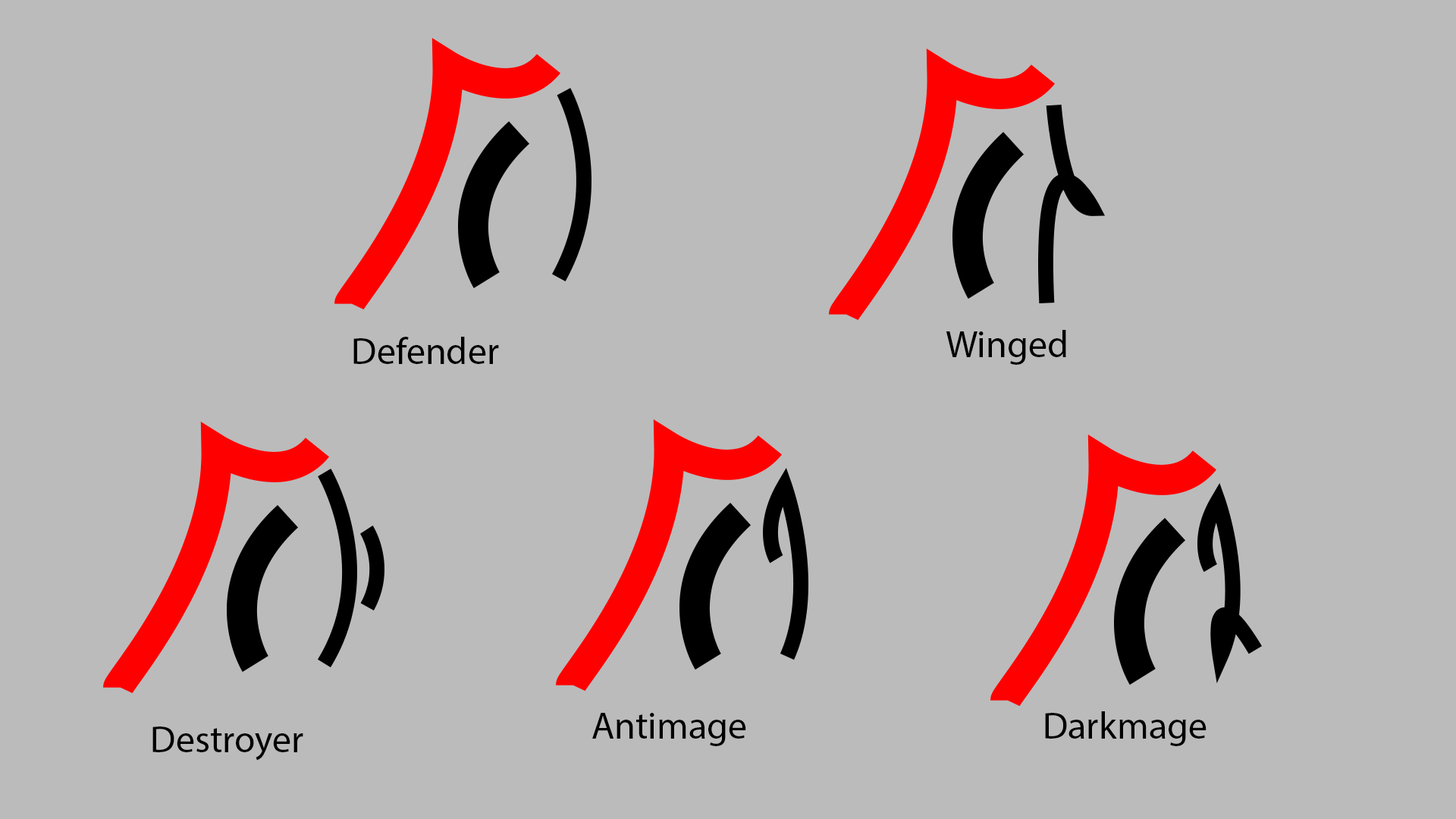
<style>
.page{position:relative;width:1456px;height:819px;background:#bbbbbb}
.page>*{position:absolute;margin:0}
.t1{font:37.9px "MyriadPro-Regular";color:#000000}
</style>
<div class="page">
<p class="t1" style="left:946px;top:330px;width:120px;height:35px">Winged</p>
<p class="t1" style="left:353px;top:337px;width:146px;height:27px">Defender</p>
<p class="t1" style="left:592px;top:713px;width:154px;height:33px">Antimage</p>
<p class="t1" style="left:1045px;top:711px;width:161px;height:35px">Darkmage</p>
<p class="t1" style="left:152px;top:726px;width:151px;height:35px">Destroyer</p>
</div>
